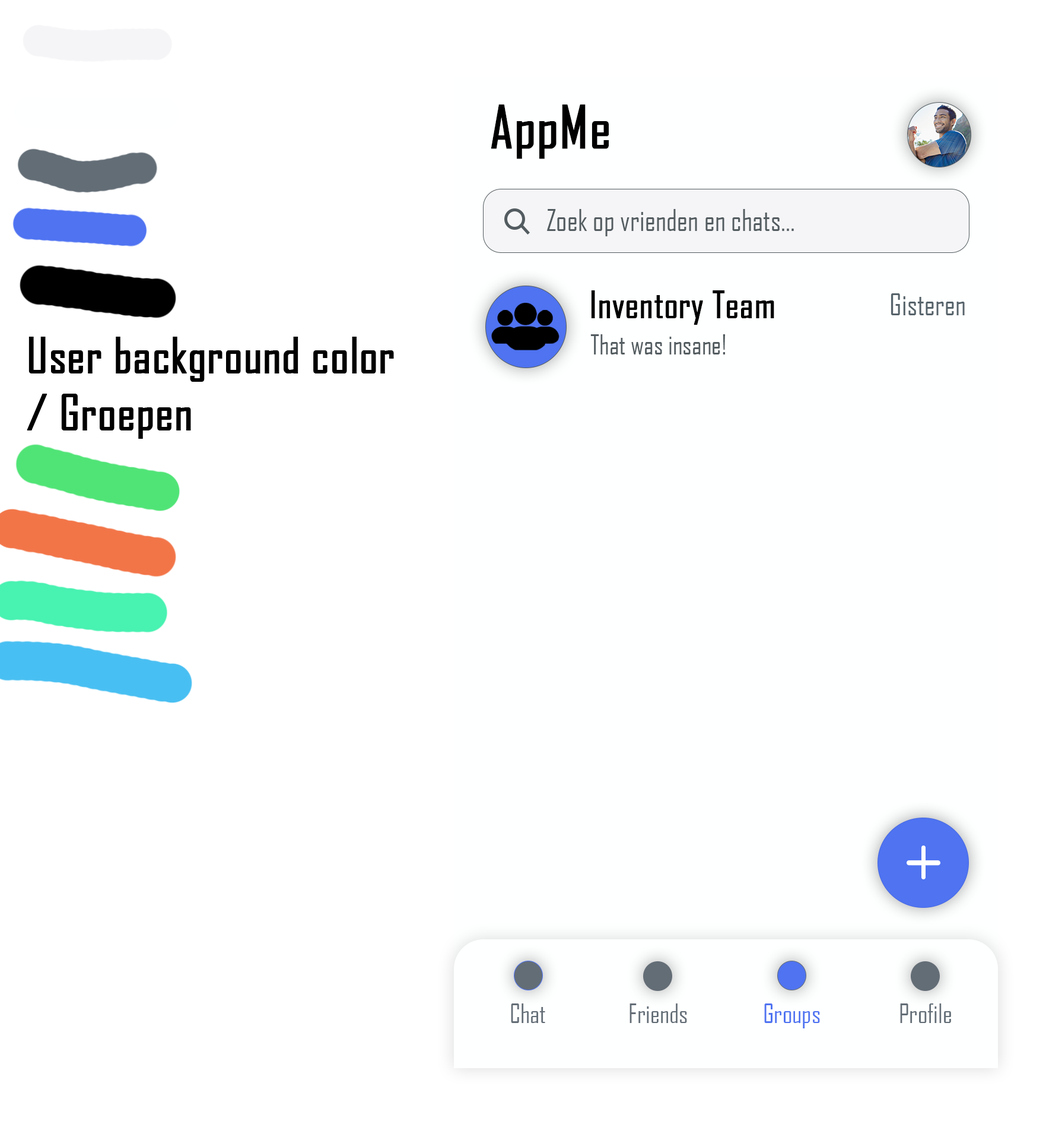
<style>
.page{position:relative;width:1046px;height:1140px;background:#ffffff}
.page>*{position:absolute;margin:0}
.t1{font:56.4px "AgencyFB-Reg";color:#000000;font-weight:bold}
.t2{font:28.6px "AgencyFB-Reg";color:#535c60}
.t3{font:35.6px "AgencyFB-Reg";color:#000000;font-weight:bold}
.t4{font:28.5px "AgencyFB-Reg";color:#56636a}
.t5{font:47.5px "AgencyFB-Reg";color:#000000;font-weight:bold}
.t6{font:26.1px "AgencyFB-Reg";color:#535c60}
.t7{font:25.6px "AgencyFB-Reg";color:#636d76}
.t8{font:25.6px "AgencyFB-Reg";color:#4f73f1}
</style>
<div class="page">
<p class="t1" style="left:491px;top:104px;width:118px;height:55px">AppMe</p>
<p class="t2" style="left:547px;top:209px;width:247px;height:27px">Zoek op vrienden en chats...</p>
<p class="t3" style="left:591px;top:290px;width:184px;height:35px">Inventory Team</p>
<p class="t4" style="left:891px;top:293px;width:74px;height:22px">Gisteren</p>
<p class="t5" style="left:27px;top:337px;width:367px;height:102px">User background color<br>/ Groepen</p>
<p class="t6" style="left:591px;top:334px;width:134px;height:20px">That was insane!</p>
<p class="t7" style="left:511px;top:1003px;width:34px;height:20px">Chat</p>
<p class="t7" style="left:630px;top:1003px;width:57px;height:20px">Friends</p>
<p class="t8" style="left:764px;top:1003px;width:56px;height:25px">Groups</p>
<p class="t7" style="left:900px;top:1003px;width:51px;height:20px">Profile</p>
</div>
